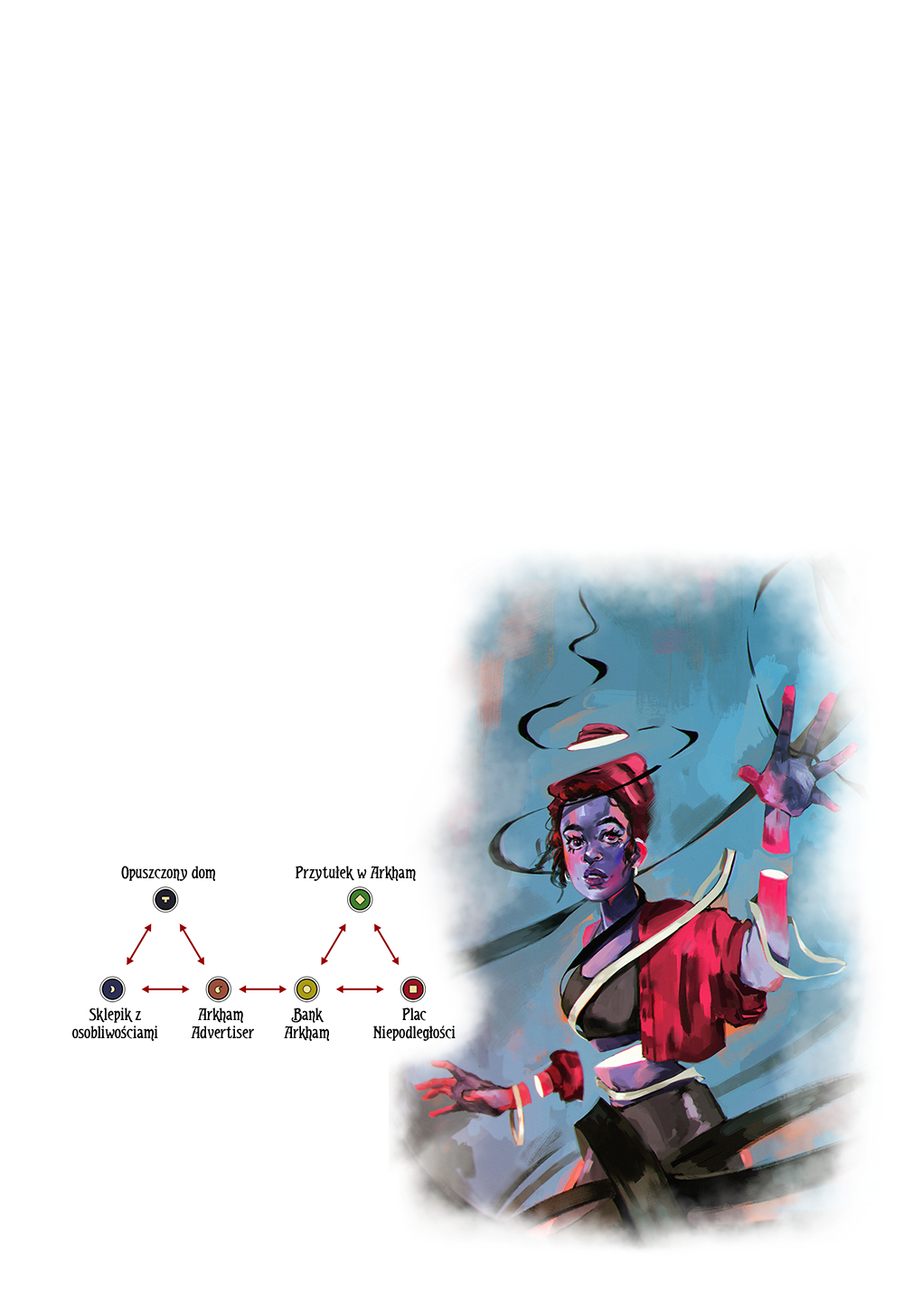
<style>
.page{position:relative;width:922px;height:1293px;background:#ffffff}
.page>*{position:absolute;margin:0}
.t1{font:18.1px "Arkhamic";color:#000000}
.t2{font:18.1px/18.1px "Arkhamic";color:#000000}
</style>
<div class="page">
<p class="t1" style="left:121px;top:866px;width:95px;height:15px">Opuszczony dom</p>
<p class="t1" style="left:296px;top:866px;width:120px;height:15px">Przytułek w Arkham</p>
<p class="t2" style="left:72px;top:1008px;width:86px;height:33px;text-align:center">Sklepik z<br>osobliwościami</p>
<p class="t2" style="left:191px;top:1008px;width:63px;height:31px;text-align:center">Arkham <br>Advertiser</p>
<p class="t2" style="left:284px;top:1008px;width:46px;height:33px;text-align:center">Bank<br>Arkham</p>
<p class="t2" style="left:373px;top:1008px;width:83px;height:33px;text-align:center">Plac<br>Niepodległości</p>
</div>
